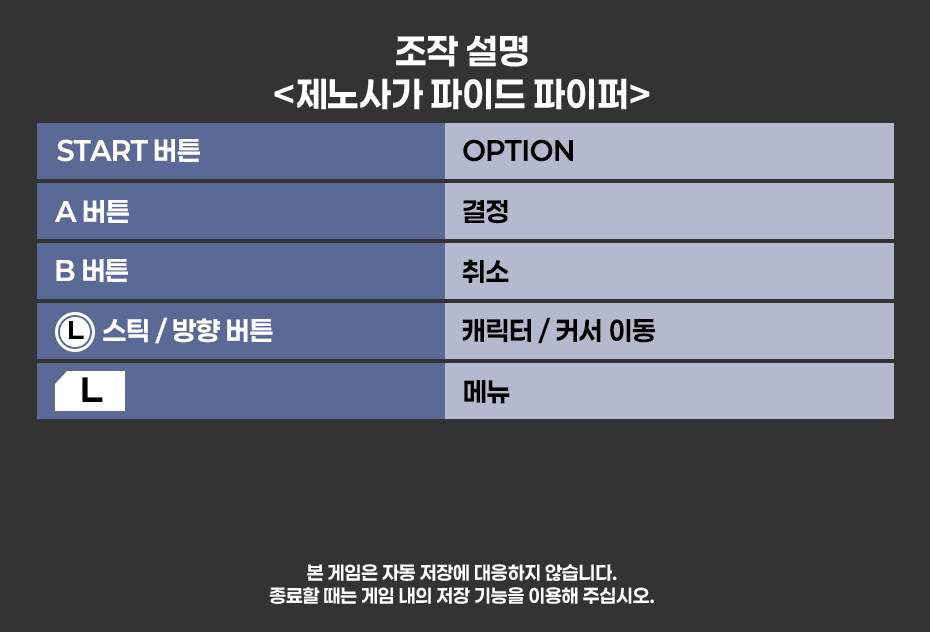
<style>
.page{position:relative;width:930px;height:632px;background:#333333}
.page>*{position:absolute;margin:0}
.t1{font:36px "Paperlogy-7Bold";color:#ffffff}
.t2{font:27px "Paperlogy-7Bold";color:#ffffff}
.t3{font:27px "Paperlogy-7Bold";color:#000000}
.t4{font:19px "Paperlogy-7Bold";color:#ffffff}
</style>
<div class="page">
<p class="t1" style="left:274px;top:35px;width:376px;height:75px;text-align:center">조작 설명<br>&lt;제노사가 파이드 파이퍼&gt;</p>
<p class="t2" style="left:57px;top:139px;width:143px;height:23px">START 버튼</p>
<p class="t3" style="left:463px;top:139px;width:110px;height:23px">OPTION</p>
<p class="t2" style="left:55px;top:200px;width:74px;height:23px">A 버튼</p>
<p class="t3" style="left:463px;top:200px;width:45px;height:24px">결정</p>
<p class="t2" style="left:56px;top:259px;width:72px;height:23px">B 버튼</p>
<p class="t3" style="left:462px;top:259px;width:47px;height:24px">취소</p>
<p class="t2" style="left:103px;top:317px;width:170px;height:27px">스틱 / 방향 버튼</p>
<p class="t3" style="left:462px;top:317px;width:193px;height:27px">캐릭터 / 커서 이동</p>
<p class="t3" style="left:464px;top:380px;width:46px;height:24px">메뉴</p>
<p class="t4" style="left:269px;top:564px;width:385px;height:40px;text-align:center">본 게임은 자동 저장에 대응하지 않습니다.<br>종료할 때는 게임 내의 저장 기능을 이용해 주십시오.</p>
</div>
